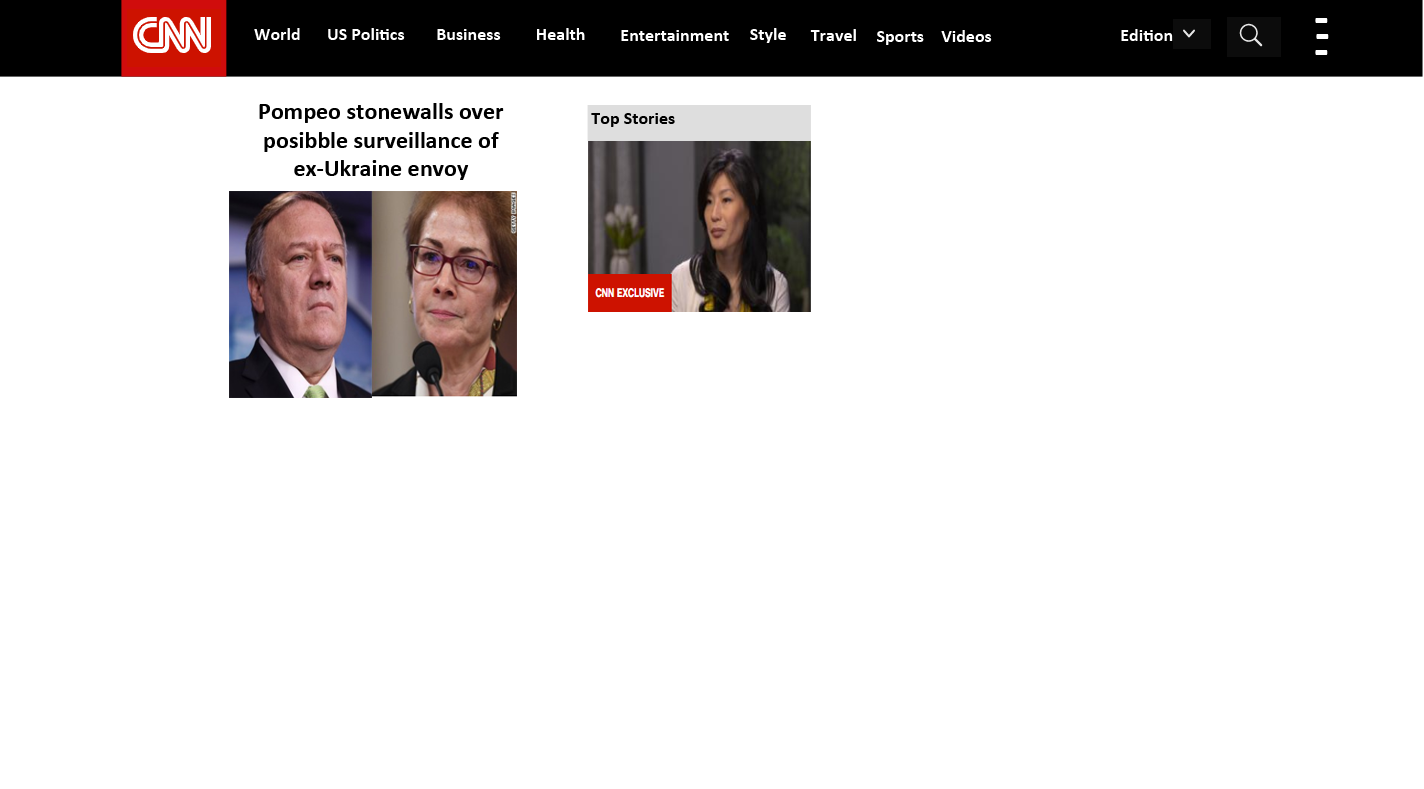
<style>
.page{position:relative;width:1424px;height:789px;background:#ffffff}
.page>*{position:absolute;margin:0}
.t1{font:18px "Calibri-Bold";color:#ffffff}
.t2{font:48px "Calibri-Bold";color:#ffffff}
.t3{font:24px "Calibri-Bold";color:#000000}
.t4{font:18px "Calibri-Bold";color:#000000}
</style>
<div class="page">
<p class="t1" style="left:254px;top:28px;width:46px;height:12px">World</p>
<p class="t1" style="left:328px;top:28px;width:77px;height:12px">US Politics</p>
<p class="t1" style="left:437px;top:29px;width:64px;height:11px">Business</p>
<p class="t1" style="left:537px;top:28px;width:48px;height:12px">Health</p>
<p class="t1" style="left:621px;top:30px;width:108px;height:11px">Entertainment</p>
<p class="t1" style="left:750px;top:28px;width:36px;height:15px">Style</p>
<p class="t1" style="left:810px;top:29px;width:46px;height:12px">Travel</p>
<p class="t1" style="left:941px;top:30px;width:51px;height:12px">Videos</p>
<p class="t1" style="left:1121px;top:29px;width:52px;height:12px">Edition</p>
<p class="t2" style="left:1315px;top:18px;width:13px;height:5px">-</p>
<p class="t1" style="left:877px;top:31px;width:47px;height:14px">Sports</p>
<p class="t2" style="left:1316px;top:34px;width:13px;height:5px">-</p>
<p class="t2" style="left:1315px;top:50px;width:13px;height:5px">-</p>
<p class="t3" style="left:259px;top:103px;width:245px;height:77px;text-align:center">Pompeo stonewalls over<br>posibble surveillance of <br>ex-Ukraine envoy</p>
<p class="t4" style="left:591px;top:113px;width:84px;height:14px">Top Stories</p>
</div>
